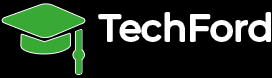
<style>
.page{position:relative;width:272px;height:78px;background:#000000}
.page>*{position:absolute;margin:0}
.t1{font:36.9px "Montserrat-Medium";color:#ffffff}
</style>
<div class="page">
<p class="t1" style="left:99px;top:13px;width:171px;height:28px">TechFord</p>
</div>
